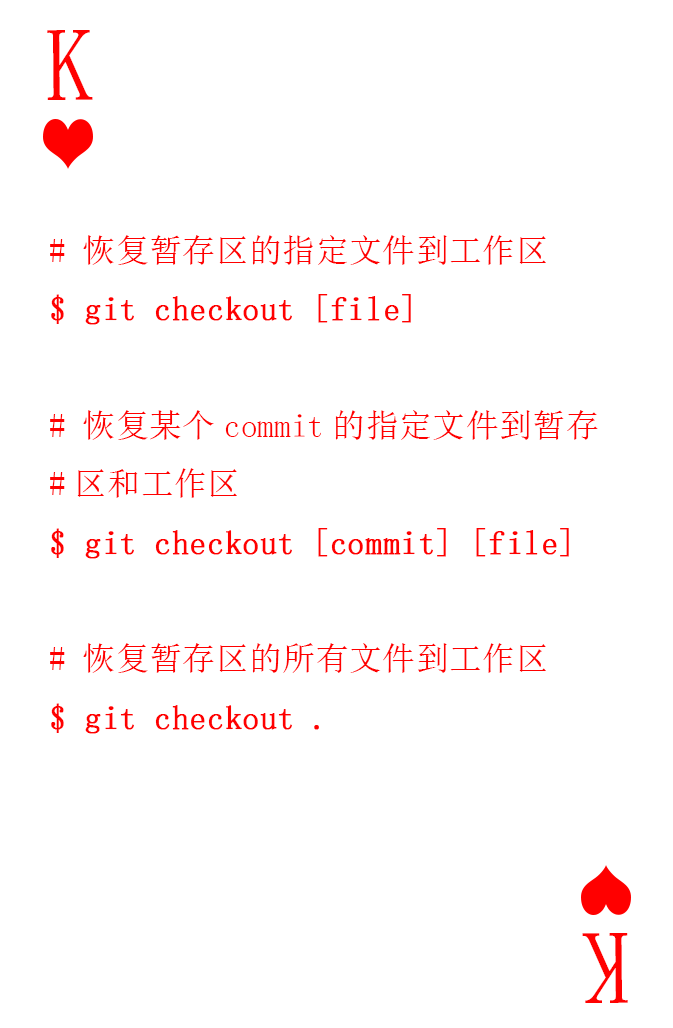
<style>
.page{position:relative;width:673px;height:1028px;background:#ffffff}
.page>*{position:absolute;margin:0}
.t1{font:104.2px "SimSun-ExtB";color:#ff0101;scale:0.93 1}
.t2{font:33.3px "SimSun";color:#ff0000;font-weight:bold}
.t3{font:33.3px "SimSun";color:#ff0000}
</style>
<div class="page">
<p class="t1" style="left:47px;top:30px;width:46px;height:70px">K</p>
<p class="t2" style="left:50px;top:235px;width:548px;height:499px"><span class="t3"># 恢复暂存区的指定文件到工作区<br></span>$ git checkout [file]<br><span class="t3"><br># 恢复某个commit的指定文件到暂存<br>#区和工作区<br></span>$ git checkout [commit] [file]<br><span class="t3"><br># 恢复暂存区的所有文件到工作区<br></span>$ git checkout .</p>
<p class="t1" style="left:582px;top:933px;width:46px;height:70px;rotate:180deg">K</p>
</div>
